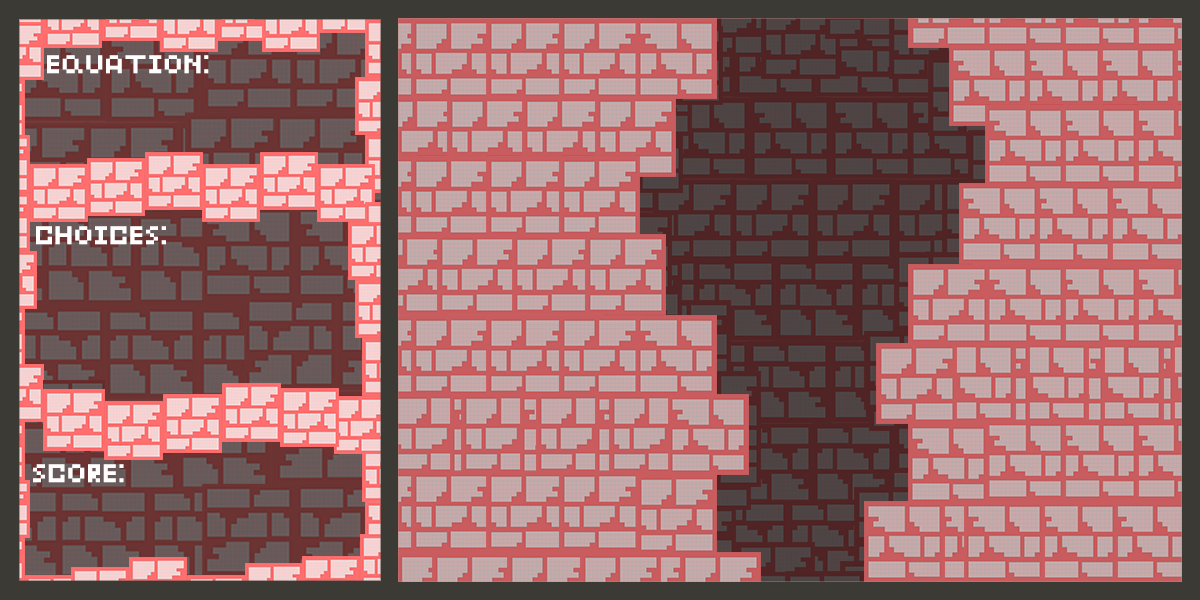
<style>
.page{position:relative;width:1200px;height:600px}
.page>*{position:absolute;margin:0}
.t1{font:17.7px "OurQuinny";color:#fffefe;text-transform:uppercase;scale:1.11 1}
</style>
<div class="page">
<p class="t1" style="left:47px;top:55px;width:162px;height:19px">EQUATION:</p>
<p class="t1" style="left:36px;top:226px;width:130px;height:19px">CHOICES:</p>
<p class="t1" style="left:33px;top:464px;width:91px;height:19px">SCORE:</p>
</div>
